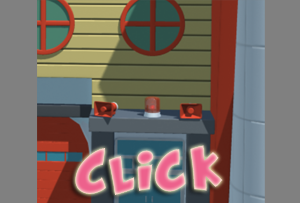
<style>
.page{position:relative;width:300px;height:203px;background:#808080}
.page>*{position:absolute;margin:0}
.t1{font:30px "KraashBlack"}
</style>
<div class="page">
<p class="t1" style="left:75px;top:145px;width:148px;height:50px">Click</p>
</div>
